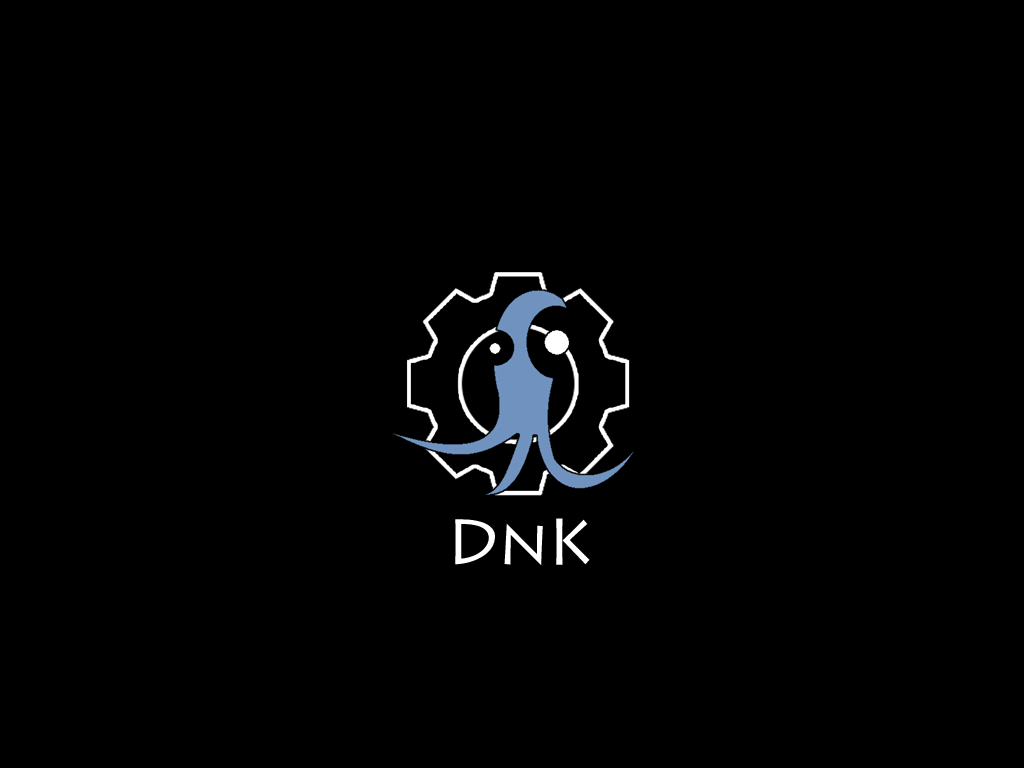
<style>
.page{position:relative;width:1024px;height:768px;background:#000000}
.page>*{position:absolute;margin:0}
.t1{font:64px "LithosPro-Regular";letter-spacing:0.02em;color:#ffffff;font-variant:small-caps}
</style>
<div class="page">
<p class="t1" style="left:455px;top:518px;width:135px;height:47px">DnK</p>
</div>
